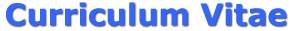
<style>
.page{position:relative;width:293px;height:31px;background:#ffffff}
.page>*{position:absolute;margin:0}
.t1{font:30px "Verdana-Bold";color:#3366ff}
</style>
<div class="page">
<p class="t1" style="left:6px;top:2px;width:280px;height:24px">Curriculum Vitae</p>
</div>
